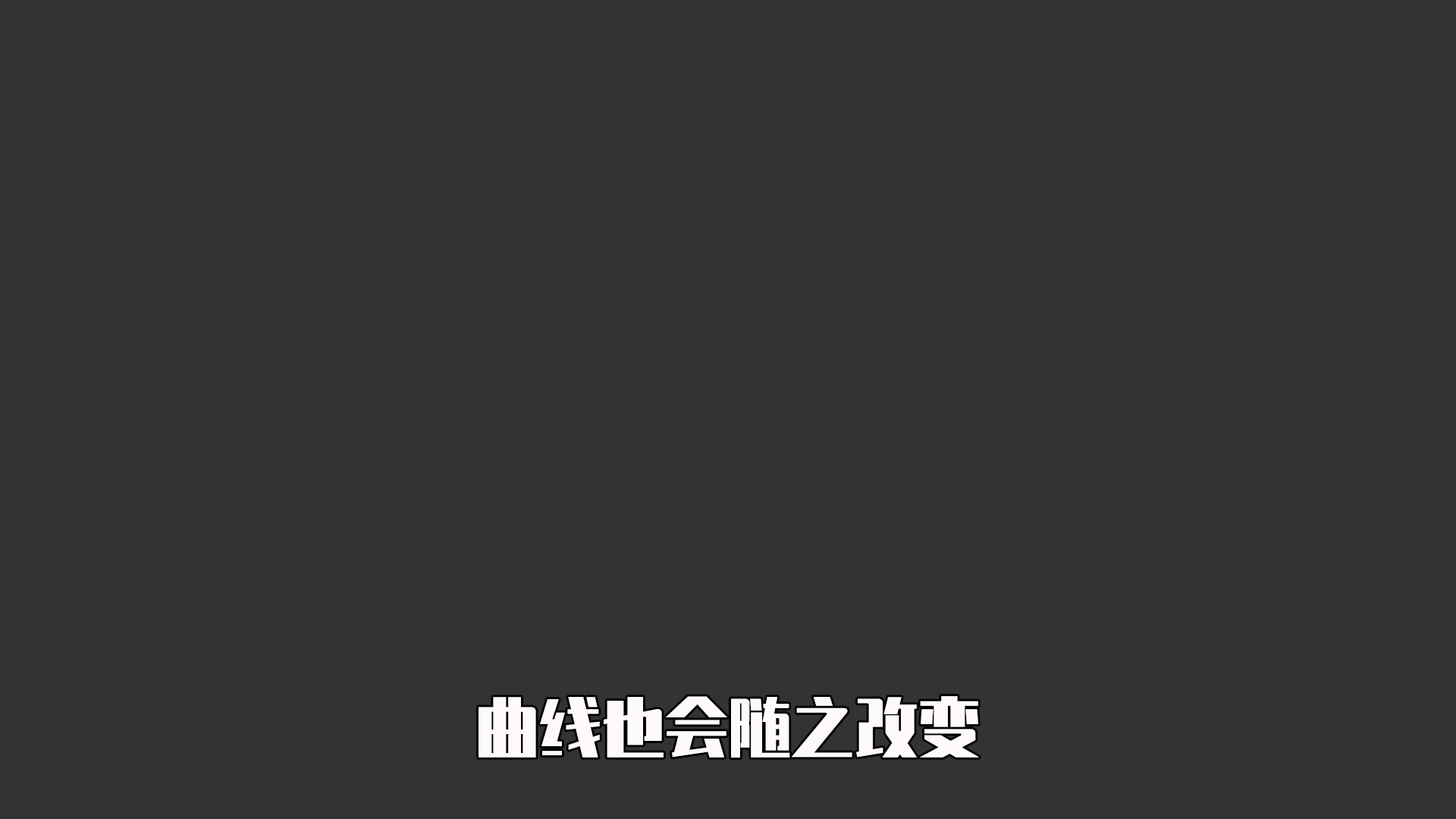
<style>
.page{position:relative;width:1456px;height:819px;background:#333333}
.page>*{position:absolute;margin:0}
.t1{font:63.2px "ZhenyanGB-Regular";color:#fefafa}
</style>
<div class="page">
<p class="t1" style="left:479px;top:696px;width:500px;height:62px">曲线也会随之改变</p>
</div>
